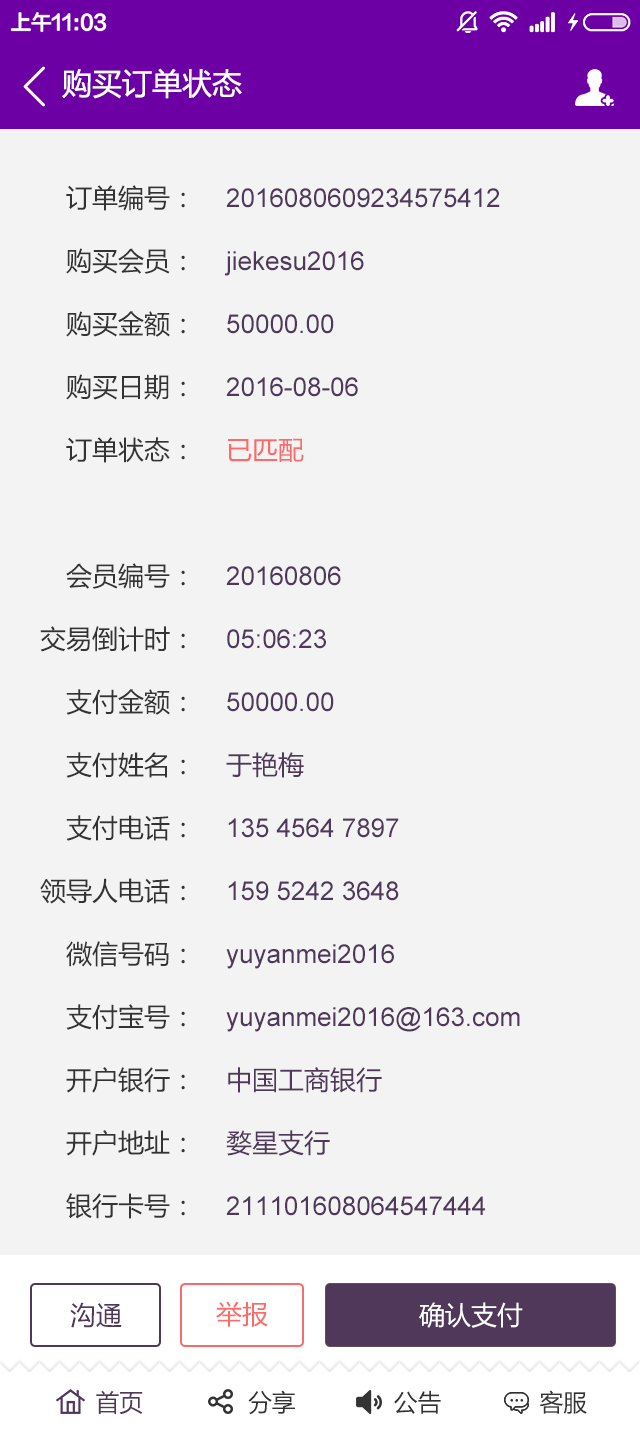
<style>
.page{position:relative;width:640px;height:1430px;background:#f3f3f3}
.page>*{position:absolute;margin:0}
.t1{font:30px "MicrosoftYaHei";color:#ffffff}
.t2{font:26px/63px "MicrosoftYaHei";color:#333333}
.t3{font:26px/63px "ArialMT";color:#50385b}
.t4{font:26px/63px "MicrosoftYaHei";color:#fa6b69}
.t5{font:26px/63px "MicrosoftYaHei";color:#50385b}
.t6{font:26px "MicrosoftYaHei";color:#50385b}
.t7{font:26px "MicrosoftYaHei";color:#fa6b69}
.t8{font:26px "MicrosoftYaHei";color:#ffffff}
.t9{font:24px "MicrosoftYaHei";color:#333333}
.t10{font:24px "MicrosoftYaHei";color:#50385b}
</style>
<div class="page">
<p class="t1" style="left:62px;top:68px;width:180px;height:31px">购买订单状态</p>
<p class="t2" style="left:40px;top:185px;width:145px;height:1034px;text-align:right">订单编号：<br>购买会员：<br>购买金额：<br>购买日期：<br>订单状态：<br><br>会员编号：<br>交易倒计时：<br>支付金额：<br>支付姓名：<br>支付电话：<br>领导人电话：<br>微信号码：<br>支付宝号：<br>开户银行：<br>开户地址：<br>银行卡号：</p>
<p class="t3" style="left:224px;top:188px;width:296px;height:1028px">2016080609234575412<br>jiekesu2016<br>50000.00<br>2016-08-06<br><span class="t4">已匹配<br><br></span>20160806<br>05:06:23<br>50000.00<br><span class="t5">于艳梅<br></span>135 4564 7897<br>159 5242 3648<br>yuyanmei2016<br>yuyanmei2016@163.com<br><span class="t5">中国工商银行<br>婺星支行<br></span>211101608064547444</p>
<p class="t6" style="left:70px;top:1302px;width:52px;height:26px">沟通</p>
<p class="t7" style="left:216px;top:1301px;width:52px;height:26px">举报</p>
<p class="t8" style="left:419px;top:1302px;width:104px;height:26px">确认支付</p>
<p class="t9" style="left:96px;top:1390px;width:491px;height:25px"><span class="t10">首页</span>               分享              公告              客服</p>
</div>
